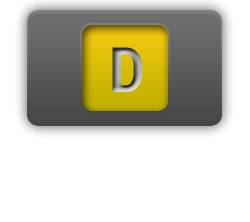
<style>
.page{position:relative;width:250px;height:222px;background:#ffffff}
.page>*{position:absolute;margin:0}
.t1{font:62.5px "Roboto-BoldCondensed"}
</style>
<div class="page">
<p class="t1" style="left:112px;top:47px;width:31px;height:45px">D</p>
</div>
